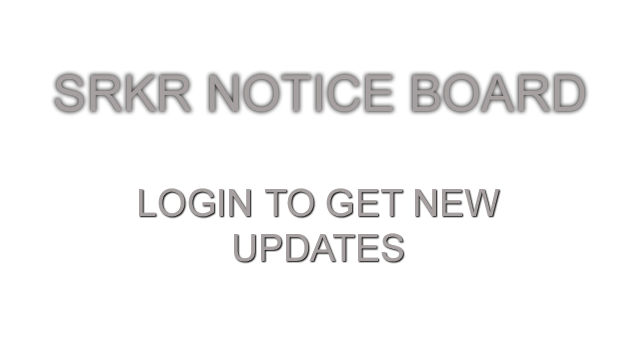
<style>
.page{position:relative;width:640px;height:360px;background:#ffffff}
.page>*{position:absolute;margin:0}
.t1{font:50px "ArialMT";color:#a7a0a0}
.t2{font:37.5px "ArialMT";color:#a7a0a0}
</style>
<div class="page">
<p class="t1" style="left:55px;top:74px;width:530px;height:38px">SRKR NOTICE BOARD</p>
<p class="t2" style="left:139px;top:188px;width:361px;height:74px;text-align:center">LOGIN TO GET NEW<br>UPDATES</p>
</div>
